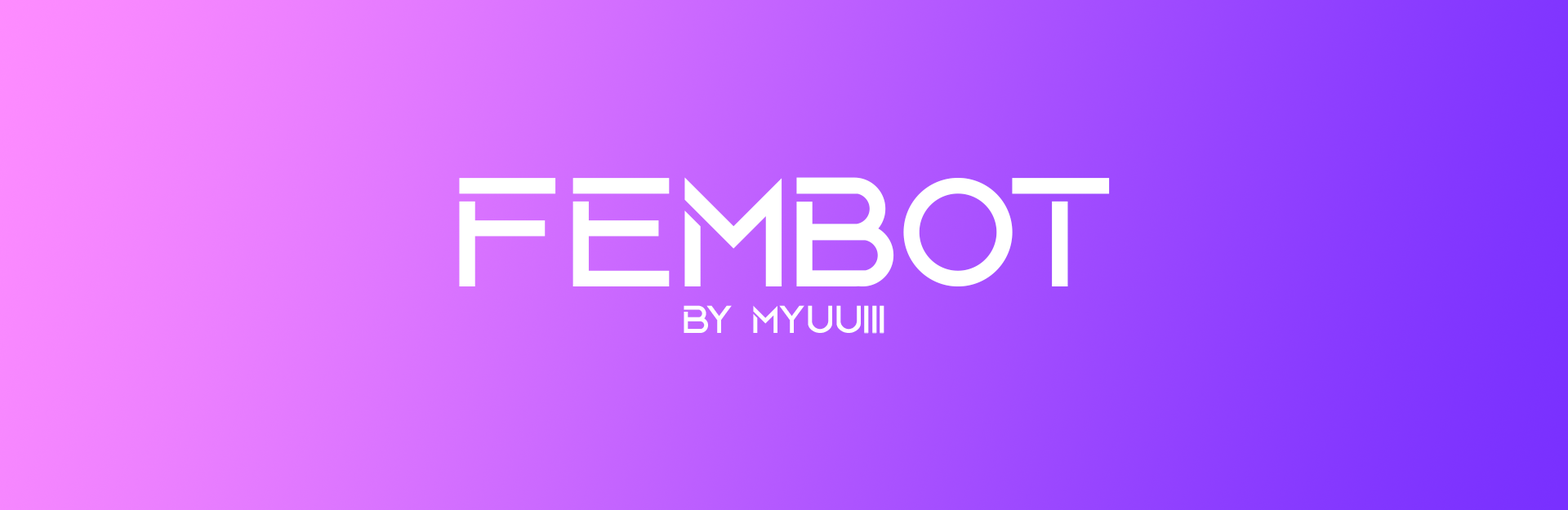
<style>
.page{position:relative;width:1568px;height:510px}
.page>*{position:absolute;margin:0}
.t1{font:163.3px "AquireRegular";color:#ffffff}
.t2{font:40.8px "AquireRegular";color:#ffffff}
</style>
<div class="page">
<p class="t1" style="left:459px;top:177px;width:651px;height:110px">FEMBOT</p>
<p class="t2" style="left:684px;top:305px;width:200px;height:29px">by Myuuiii</p>
</div>
